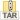
<style>
.page{position:relative;width:20px;height:20px;background:#ffffff}
.page>*{position:absolute;margin:0}
.t1{font:7px "MeiryoUI-Bold";color:#606061}
</style>
<div class="page">
<p class="t1" style="left:2px;top:12px;width:15px;height:7px">TAR</p>
</div>
